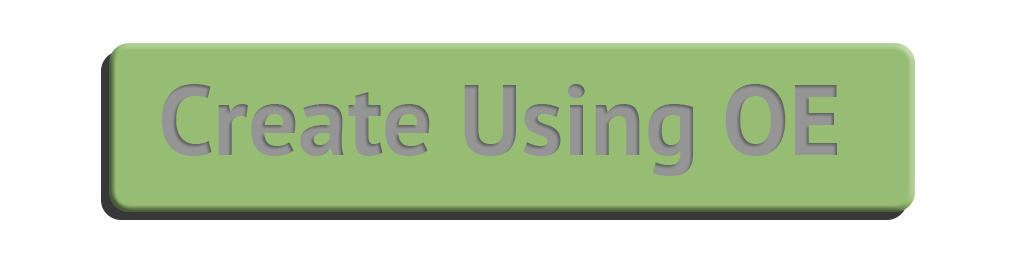
<style>
.page{position:relative;width:1024px;height:256px;background:#ffffff}
.page>*{position:absolute;margin:0}
.t1{font:100px "PTSans-Bold";color:#959595}
</style>
<div class="page">
<p class="t1" style="left:161px;top:84px;width:676px;height:92px">Create Using OE</p>
</div>
